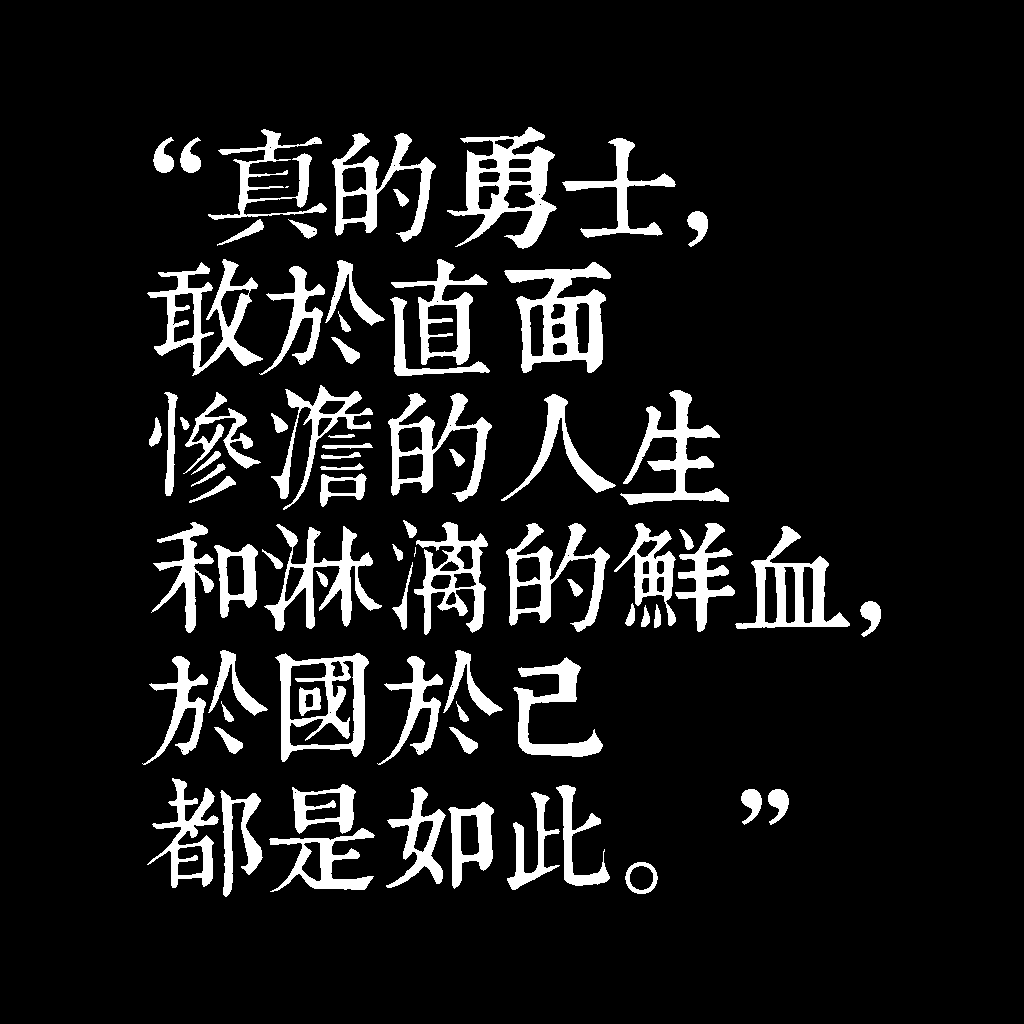
<style>
.page{position:relative;width:1024px;height:1024px;background:#000000}
.page>*{position:absolute;margin:0}
.t1{font:120px/130px "TpldKhangXiDictTrial";letter-spacing:-0.02em;color:#ffffff}
</style>
<div class="page">
<p class="t1" style="left:142px;top:127px;width:739px;height:770px">“真的勇士，<br>敢於直面<br>慘澹的人生<br>和淋漓的鮮血，<br>於國於己<br>都是如此。”</p>
</div>
